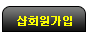
<style>
.page{position:relative;width:89px;height:32px;background:#ffffff}
.page>*{position:absolute;margin:0}
.t1{font:11px "Dotum";letter-spacing:-0.05em;color:#fcff00;font-weight:bold}
</style>
<div class="page">
<p class="t1" style="left:17px;top:16px;width:55px;height:10px">샵회원가입</p>
</div>
